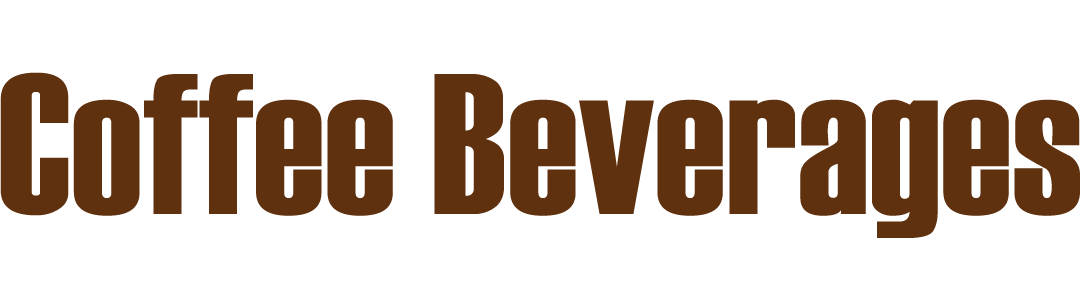
<style>
.page{position:relative;width:1080px;height:300px;background:#ffffff}
.page>*{position:absolute;margin:0}
.t1{font:200px "Haettenschweiler";color:#5f310f}
</style>
<div class="page">
<p class="t1" style="left:0px;top:72px;width:1080px;height:166px">Coffee Beverages</p>
</div>
